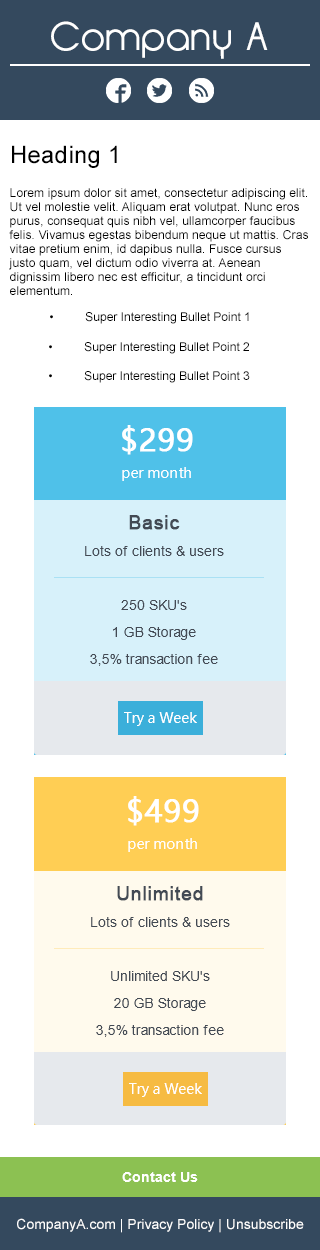
<style>
.page{position:relative;width:320px;height:1250px;background:#ffffff}
.page>*{position:absolute;margin:0}
.t1{font:39.4px "Opificio";letter-spacing:0.01em;color:#ffffff}
.t2{font:24px "ArialMT";letter-spacing:0.01em;color:#000000}
.t3{font:12px/14px "ArialMT";letter-spacing:0.01em;color:#000000}
.t4{font:12px "ArialMT";color:#000000}
.t5{font:14px/27px "MicrosoftYaHei";color:#ffffff}
.t6{font:30px/27px "MicrosoftYaHei";color:#ffffff;font-weight:bold}
.t7{font:14px/27px "ArialMT";color:#434a54}
.t8{font:19px/27px "ArialMT";color:#434a54;font-weight:bold}
.t9{font:14px "MicrosoftYaHei";color:#ffffff}
.t10{font:14px "Arial-BoldMT";color:#ffffff}
.t11{font:14px "ArialMT";color:#ffffff}
</style>
<div class="page">
<p class="t1" style="left:51px;top:21px;width:217px;height:38px">Company A</p>
<p class="t2" style="left:12px;top:145px;width:105px;height:23px">Heading 1</p>
<p class="t3" style="left:9px;top:188px;width:299px;height:107px">Lorem ipsum dolor sit amet, consectetur adipiscing elit. Ut vel molestie velit. Aliquam erat volutpat. Nunc eros purus, consequat quis nibh vel, ullamcorper faucibus felis. Vivamus egestas bibendum neque ut mattis. Cras vitae pretium enim, id dapibus nulla. Fusce cursus justo quam, vel dictum odio viverra at. Aenean dignissim libero nec est efficitur, a tincidunt orci elementum.</p>
<p class="t4" style="left:50px;top:312px;width:199px;height:12px">•  Super Interesting Bullet Point 1</p>
<p class="t4" style="left:49px;top:342px;width:200px;height:12px">•  Super Interesting Bullet Point 2</p>
<p class="t4" style="left:49px;top:371px;width:201px;height:12px">•  Super Interesting Bullet Point 3</p>
<p class="t5" style="left:122px;top:425px;width:71px;height:56px;text-align:center"><span class="t6">$299<br></span>per month</p>
<p class="t7" style="left:85px;top:515px;width:139px;height:151px;text-align:center"><span class="t8">Basic<br></span>Lots of clients &amp; users<br><br>250 SKU's<br>1 GB Storage<br>3,5% transaction fee</p>
<p class="t9" style="left:124px;top:712px;width:73px;height:14px">Try a Week</p>
<p class="t5" style="left:128px;top:796px;width:71px;height:56px;text-align:center"><span class="t6">$499<br></span>per month</p>
<p class="t7" style="left:91px;top:886px;width:139px;height:151px;text-align:center"><span class="t8">Unlimited<br></span>Lots of clients &amp; users<br><br>Unlimited SKU's<br>20 GB Storage<br>3,5% transaction fee</p>
<p class="t9" style="left:129px;top:1083px;width:73px;height:14px">Try a Week</p>
<p class="t10" style="left:122px;top:1172px;width:76px;height:10px">Contact Us</p>
<p class="t11" style="left:17px;top:1218px;width:287px;height:15px">CompanyA.com | Privacy Policy | Unsubscribe</p>
</div>
